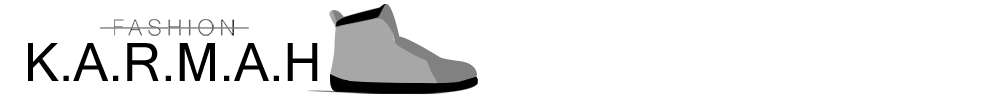
<style>
.page{position:relative;width:1000px;height:100px;background:#ffffff}
.page>*{position:absolute;margin:0}
.t1{font:52.9px "MicrosoftSansSerif";color:#000000}
</style>
<div class="page">
<p class="t1" style="left:28px;top:43px;width:290px;height:38px">K.A.R.M.A.H</p>
</div>
